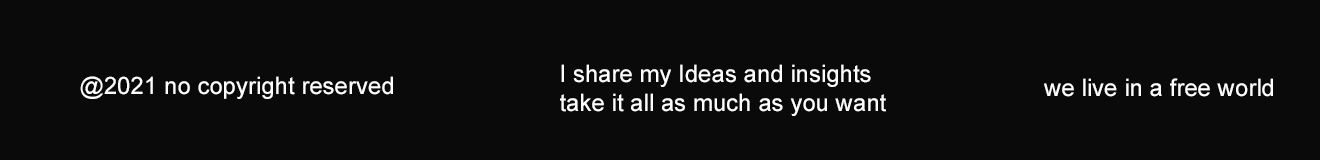
<style>
.page{position:relative;width:1320px;height:160px;background:#0a0a0a}
.page>*{position:absolute;margin:0}
.t1{font:24px "ArialMT";color:#fffefe}
</style>
<div class="page">
<p class="t1" style="left:560px;top:64px;width:326px;height:52px">I share my Ideas and insights<br>take it all as much as you want</p>
<p class="t1" style="left:80px;top:76px;width:313px;height:23px">@2021 no copyright reserved</p>
<p class="t1" style="left:1044px;top:78px;width:229px;height:19px">we live in a free world</p>
</div>
